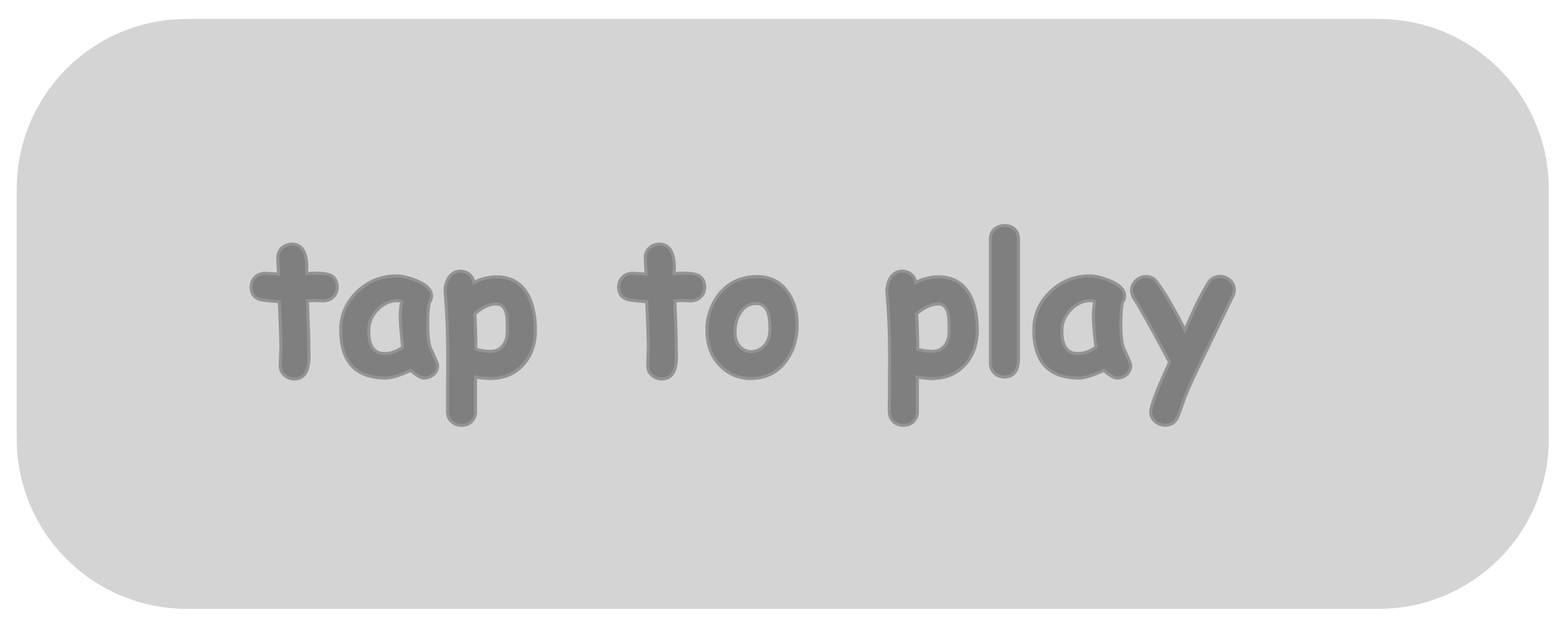
<style>
.page{position:relative;width:1568px;height:629px;background:#d4d4d4}
.page>*{position:absolute;margin:0}
.t1{font:184.2px "ComicSansMS-Bold";color:#7f7f7f}
</style>
<div class="page">
<p class="t1" style="left:252px;top:227px;width:981px;height:197px">tap to play</p>
</div>
